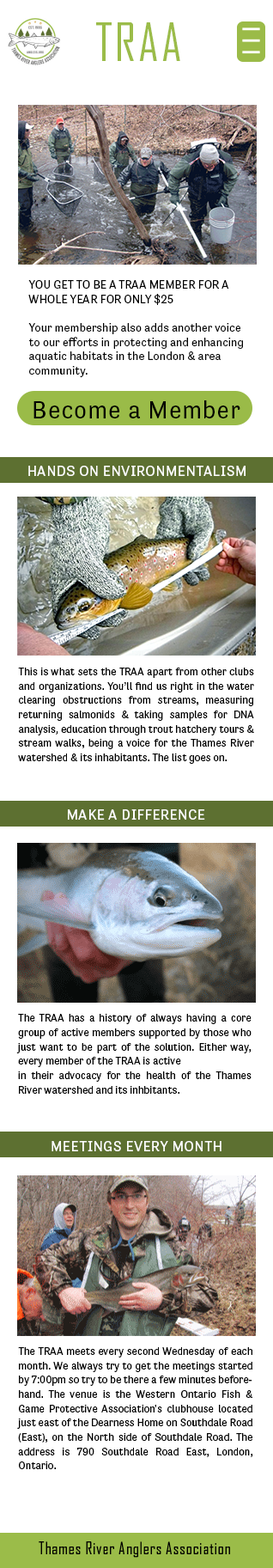
<style>
.page{position:relative;width:273px;height:1568px;background:#ffffff}
.page>*{position:absolute;margin:0}
.t1{font:50.6px "AgencyFB-Regular";letter-spacing:0.038em;color:#9bbc49}
.t2{font:11.9px "Tenso-Regular";color:#000000}
.t3{font:24.7px "Tenso-Regular";letter-spacing:0.038em;color:#000000}
.t4{font:14.3px "Tenso-Regular";letter-spacing:0.038em;color:#ffffff}
.t5{font:10.7px/14.3px "Tenso-Regular";color:#000000}
.t6{font:16.2px "AgencyFB-Regular";letter-spacing:0.038em;color:#000000}
</style>
<div class="page">
<p class="t1" style="left:96px;top:22px;width:84px;height:39px">TRAA</p>
<p class="t2" style="left:28px;top:280px;width:215px;height:97px">YOU GET TO BE A TRAA MEMBER FOR A WHOLE YEAR FOR ONLY $25<br><br>Your membership also adds another voice to our efforts in protecting and enhancing aquatic habitats in the London &amp; area community.</p>
<p class="t3" style="left:34px;top:400px;width:207px;height:18px">Become a Member</p>
<p class="t4" style="left:28px;top:466px;width:218px;height:10px">HANDS ON ENVIRONMENTALISM</p>
<p class="t5" style="left:18px;top:668px;width:236px;height:96px;text-align:justify">This is what sets the TRAA apart from other clubs and organizations. You’ll find us right in the water clearing obstructions from streams, measuring returning salmonids &amp; taking samples for DNA analysis, education through trout hatchery tours &amp; stream walks, being a voice for the Thames River watershed &amp; its inhabitants. The list goes on.</p>
<p class="t4" style="left:68px;top:809px;width:137px;height:11px">MAKE A DIFFERENCE</p>
<p class="t5" style="left:16px;top:1014px;width:236px;height:80px;text-align:justify">The TRAA has a history of always having a core group of active members supported by those who just want to be part of the solution. Either way, every member of the TRAA is active <br>in their advocacy for the health of the Thames River watershed and its inhbitants.</p>
<p class="t4" style="left:52px;top:1141px;width:170px;height:10px">MEETINGS EVERY MONTH</p>
<p class="t5" style="left:17px;top:1347px;width:236px;height:122px;text-align:justify">The TRAA meets every second Wednesday of each month. We always try to get the meetings started by 7:00pm so try to be there a few minutes beforehand. The venue is the Western Ontario Fish &amp; Game Protective Association's clubhouse located just east of the Dearness Home on Southdale Road (East), on the North side of Southdale Road. The address is 790 Southdale Road East, London, Ontario.</p>
<p class="t6" style="left:39px;top:1541px;width:191px;height:17px">Thames River Anglers Association</p>
</div>
